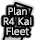
<style>
.page{position:relative;width:35px;height:40px;background:#000000}
.page>*{position:absolute;margin:0}
.t1{font:9px/10px "UDShinGoPro-Light";color:#e2e2e2;font-weight:bold}
</style>
<div class="page">
<p class="t1" style="left:3px;top:7px;width:29px;height:29px;text-align:center">Plan<br>R4 Kai<br>Fleet</p>
</div>
